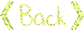
<style>
.page{position:relative;width:84px;height:30px;background:#ffffff}
.page>*{position:absolute;margin:0}
.t1{font:28px "DJBChalkItUp";scale:0.9 1}
</style>
<div class="page">
<p class="t1" style="left:19px;top:4px;width:48px;height:22px">Back</p>
</div>
